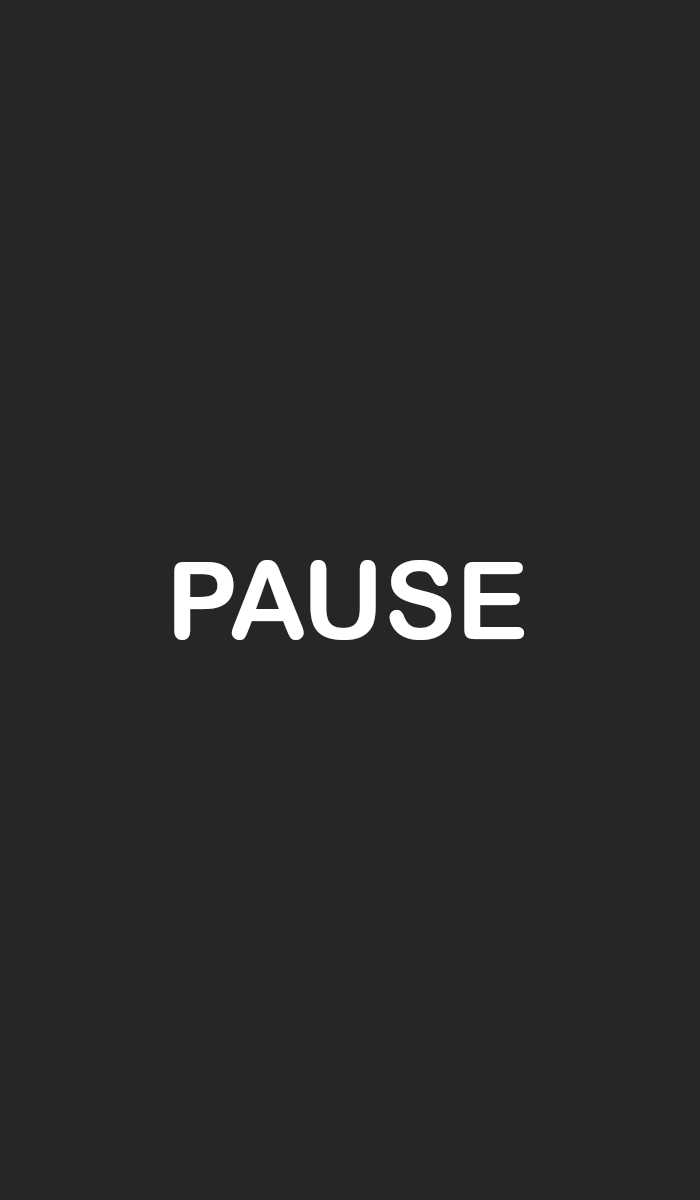
<style>
.page{position:relative;width:700px;height:1200px;background:#262626}
.page>*{position:absolute;margin:0}
.t1{font:108px "ArialRoundedMTBold";color:#ffffff}
</style>
<div class="page">
<p class="t1" style="left:174px;top:560px;width:351px;height:80px">PAUSE</p>
</div>
